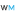
<style>
.page{position:relative;width:16px;height:16px;background:#ffffff}
.page>*{position:absolute;margin:0}
.t1{font:7px "Numans-Regular";letter-spacing:0.05em;color:#3f3f3f;font-weight:bold}
.t2{font:7px "Numans-Regular";letter-spacing:0.05em;color:#32b2e6;font-weight:bold}
</style>
<div class="page">
<p class="t1" style="left:0px;top:5px;width:15px;height:6px">W<span class="t2">M</span></p>
</div>
